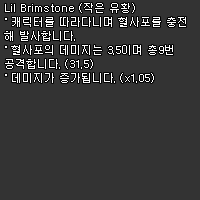
<style>
.page{position:relative;width:200px;height:200px;background:#333333}
.page>*{position:absolute;margin:0}
.t1{font:11px/14px "Dotum";color:#ffffff}
</style>
<div class="page">
<p class="t1" style="left:4px;top:3px;width:182px;height:80px">Lil Brimstone (작은 유황)<br>˚ 캐릭터를 따라다니며 혈사포를 충전<br>해 발사합니다.<br>˚ 혈사포의 데미지는 3.5이며 총9번<br>공격합니다. (31.5)<br>˚ 데미지가 증가됩니다. (x1.05)</p>
</div>
